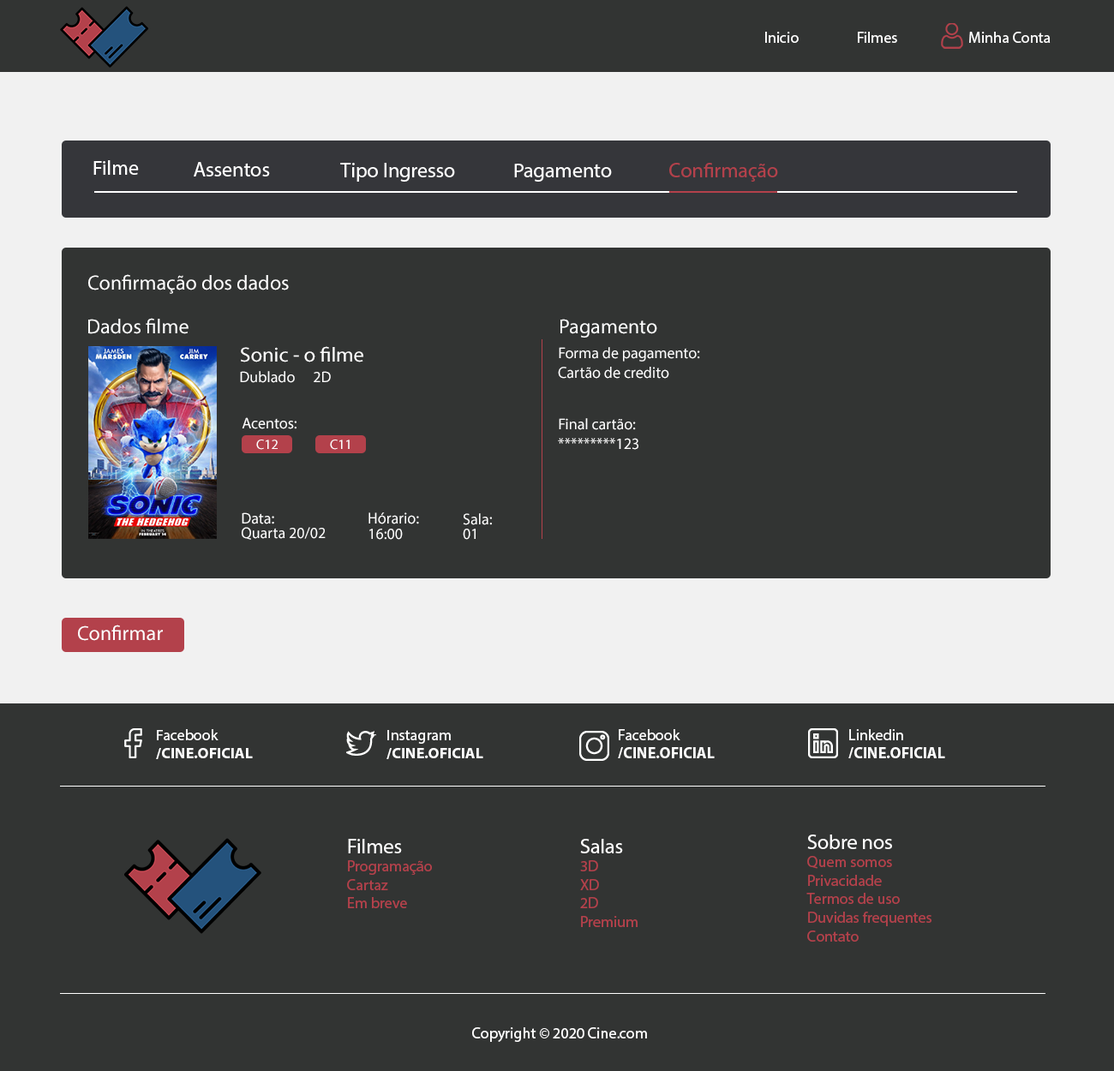
<style>
.page{position:relative;width:1114px;height:1071px;background:#323433}
.page>*{position:absolute;margin:0}
.t1{font:15.4px "MyriadPro-Regular";color:#ffffff}
.t2{font:20.5px "MyriadPro-Regular";color:#ffffff}
.t3{font:20.6px "MyriadPro-Regular";color:#ffffff}
.t4{font:20.6px "MyriadPro-Regular";color:#b3414b}
.t5{font:20.6px "MyriadPro-Regular";color:#feffff}
.t6{font:15.8px "MyriadPro-Regular";color:#ffffff}
.t7{font:13.7px "MyriadPro-Regular";color:#ffffff}
.t8{font:15.2px "MyriadPro-Bold";color:#ffffff}
.t9{font:15.2px "MyriadPro-Regular";color:#ffffff}
.t10{font:15.4px "MyriadPro-Bold";color:#ffffff}
.t11{font:15.4px "MyriadPro-Regular";color:#b3414b}
</style>
<div class="page">
<p class="t1" style="left:765px;top:32px;width:285px;height:11px">Inicio  Filmes        Minha Conta</p>
<p class="t2" style="left:93px;top:160px;width:46px;height:15px">Filme</p>
<p class="t3" style="left:194px;top:162px;width:76px;height:14px">Assentos</p>
<p class="t3" style="left:340px;top:163px;width:115px;height:19px">Tipo Ingresso</p>
<p class="t2" style="left:514px;top:164px;width:98px;height:18px">Pagamento</p>
<p class="t4" style="left:669px;top:163px;width:109px;height:19px">Confirmação</p>
<p class="t3" style="left:88px;top:274px;width:201px;height:20px">Confirmação dos dados</p>
<p class="t5" style="left:88px;top:318px;width:100px;height:16px">Dados filme</p>
<p class="t5" style="left:560px;top:319px;width:97px;height:19px">Pagamento</p>
<p class="t3" style="left:241px;top:346px;width:122px;height:16px">Sonic - o filme</p>
<p class="t1" style="left:559px;top:347px;width:141px;height:14px">Forma de pagamento:</p>
<p class="t1" style="left:240px;top:371px;width:55px;height:12px">Dublado</p>
<p class="t1" style="left:314px;top:371px;width:17px;height:11px">2D</p>
<p class="t6" style="left:558px;top:367px;width:111px;height:12px">Cartão de credito</p>
<p class="t1" style="left:242px;top:417px;width:54px;height:12px">Acentos:</p>
<p class="t1" style="left:559px;top:418px;width:77px;height:12px">Final cartão:</p>
<p class="t6" style="left:558px;top:438px;width:80px;height:12px">*********123</p>
<p class="t7" style="left:256px;top:439px;width:22px;height:11px">C12</p>
<p class="t7" style="left:330px;top:439px;width:20px;height:11px">C11</p>
<p class="t1" style="left:242px;top:512px;width:32px;height:12px">Data:</p>
<p class="t6" style="left:368px;top:512px;width:51px;height:12px">Hórario:</p>
<p class="t1" style="left:463px;top:513px;width:29px;height:12px">Sala:</p>
<p class="t1" style="left:242px;top:527px;width:84px;height:13px">Quarta 20/02</p>
<p class="t1" style="left:369px;top:529px;width:34px;height:11px">16:00</p>
<p class="t1" style="left:463px;top:529px;width:12px;height:11px">01</p>
<p class="t2" style="left:78px;top:624px;width:85px;height:17px">Confirmar</p>
<p class="t8" style="left:156px;top:729px;width:97px;height:30px"><span class="t9">Facebook<br></span>/CINE.OFICIAL</p>
<p class="t8" style="left:386px;top:730px;width:97px;height:29px"><span class="t9">Instagram<br></span>/CINE.OFICIAL</p>
<p class="t10" style="left:618px;top:729px;width:96px;height:29px"><span class="t1">Facebook<br></span>/CINE.OFICIAL</p>
<p class="t10" style="left:848px;top:729px;width:97px;height:29px"><span class="t1">Linkedin<br></span>/CINE.OFICIAL</p>
<p class="t11" style="left:347px;top:839px;width:85px;height:69px"><span class="t3">Filmes<br></span>Programação<br>Cartaz<br>Em breve</p>
<p class="t11" style="left:580px;top:839px;width:57px;height:88px"><span class="t3">Salas<br></span>3D<br>XD<br>2D<br>Premium</p>
<p class="t11" style="left:806px;top:834px;width:125px;height:107px"><span class="t3">Sobre nos<br></span>Quem somos<br>Privacidade<br>Termos de uso<br>Duvidas frequentes<br>Contato</p>
<p class="t1" style="left:472px;top:1027px;width:175px;height:15px">Copyright © 2020 Cine.com</p>
</div>
